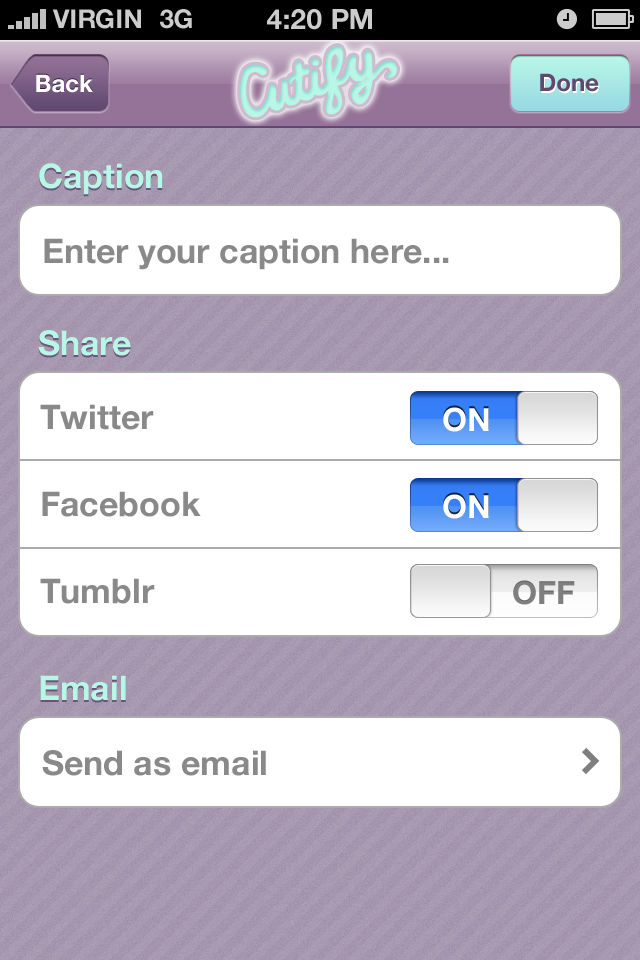
<style>
.page{position:relative;width:640px;height:960px;background:#ffffff}
.page>*{position:absolute;margin:0}
.t1{font:26px "HelveticaNeue-Bold";color:#cccccc;text-transform:uppercase}
.t2{font:28px "HelveticaNeue-Bold";color:#cccccc;text-transform:uppercase}
.t3{font:24px "HelveticaNeue-Bold";color:#ffffff}
.t4{font:24px "HelveticaNeue-Bold";color:#604871}
.t5{font:34px "HelveticaNeue-Bold";color:#b8f6e5}
.t6{font:34px "HelveticaNeue-Bold";color:#898989}
.t7{font:34px/87px "HelveticaNeue-Bold";color:#898989}
.t8{font:32px "HelveticaNeue-Bold";color:#ffffff}
.t9{font:32px "HelveticaNeue-Bold";color:#7f7f7f}
</style>
<div class="page">
<p class="t1" style="left:52px;top:9px;width:89px;height:20px">VIRGIN</p>
<p class="t1" style="left:160px;top:9px;width:32px;height:20px">3G</p>
<p class="t2" style="left:267px;top:9px;width:105px;height:21px">4:20 pM</p>
<p class="t3" style="left:36px;top:74px;width:57px;height:19px">Back</p>
<p class="t4" style="left:540px;top:73px;width:59px;height:19px">Done</p>
<p class="t5" style="left:39px;top:163px;width:124px;height:32px">Caption</p>
<p class="t6" style="left:44px;top:238px;width:405px;height:32px">Enter your caption here...</p>
<p class="t5" style="left:38px;top:330px;width:93px;height:26px">Share</p>
<p class="t7" style="left:40px;top:404px;width:161px;height:200px">Twitter<br>Facebook<br>Tumblr</p>
<p class="t8" style="left:443px;top:407px;width:46px;height:25px">ON</p>
<p class="t8" style="left:443px;top:494px;width:46px;height:25px">ON</p>
<p class="t9" style="left:513px;top:580px;width:62px;height:25px">OFF</p>
<p class="t5" style="left:40px;top:675px;width:86px;height:26px">Email</p>
<p class="t6" style="left:42px;top:750px;width:224px;height:26px">Send as email</p>
</div>
